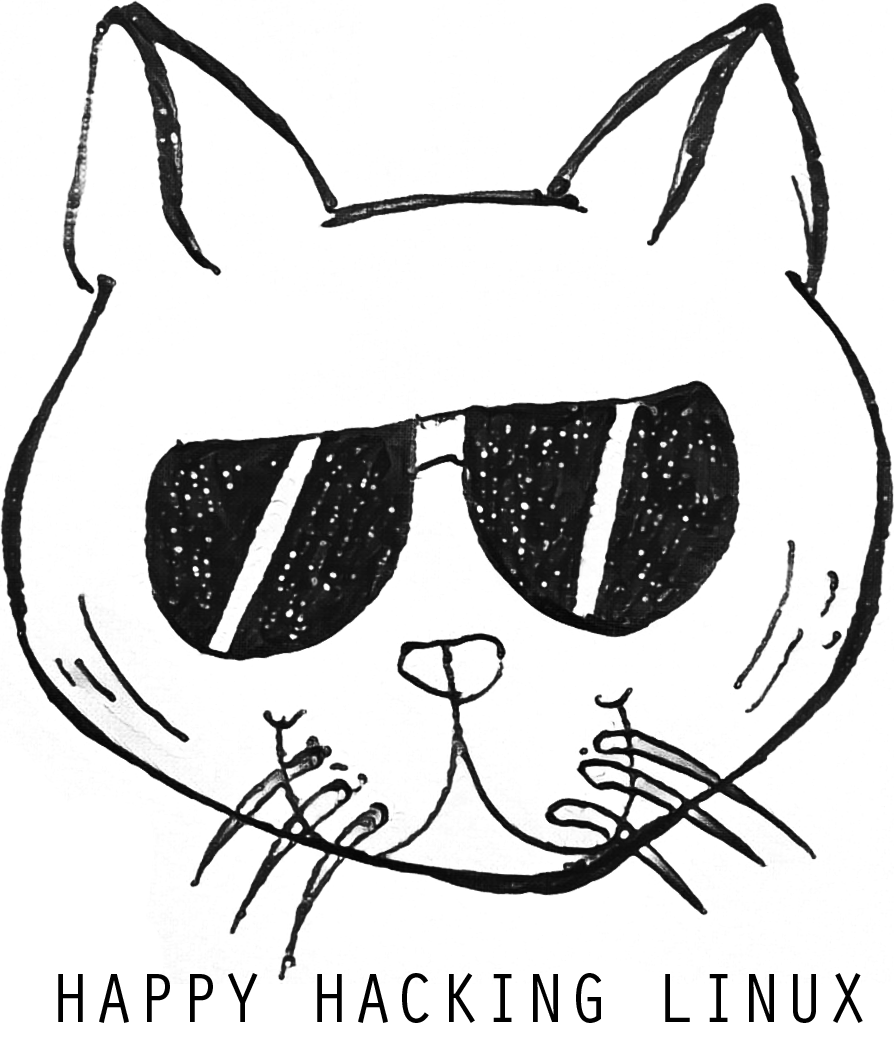
<style>
.page{position:relative;width:894px;height:1044px;background:#ffffff}
.page>*{position:absolute;margin:0}
.t1{font:72px "OratorStd";color:#000000}
</style>
<div class="page">
<p class="t1" style="left:58px;top:973px;width:805px;height:50px">HAPPY HACKING LINUX</p>
</div>
